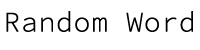
<style>
.page{position:relative;width:200px;height:50px;background:#ffffff}
.page>*{position:absolute;margin:0}
.t1{font:28px "SourceCodePro-Light";color:#000000;font-weight:bold}
</style>
<div class="page">
<p class="t1" style="left:6px;top:11px;width:187px;height:21px">Random Word</p>
</div>
